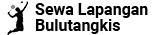
<style>
.page{position:relative;width:167px;height:35px;background:#ffffff}
.page>*{position:absolute;margin:0}
.t1{font:16px "Roboto-Bold";color:#000000}
</style>
<div class="page">
<p class="t1" style="left:35px;top:3px;width:113px;height:15px">Sewa Lapangan</p>
<p class="t1" style="left:36px;top:19px;width:84px;height:15px">Bulutangkis</p>
</div>
